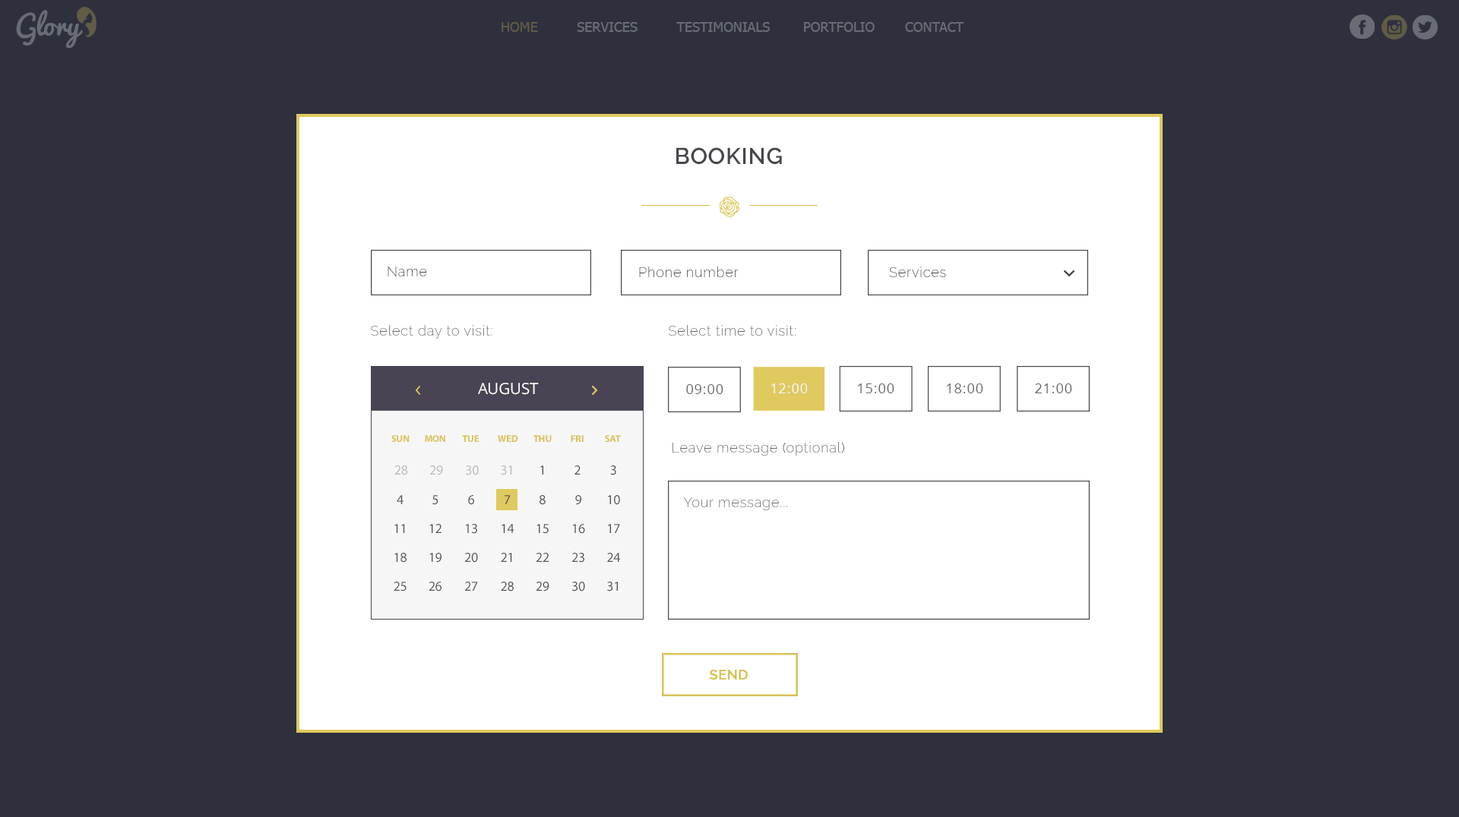
<style>
.page{position:relative;width:1459px;height:817px;background:#2e303d}
.page>*{position:absolute;margin:0}
.t1{font:22.8px "Raleway-SemiBold";letter-spacing:0.025em;color:#48464c}
.t2{font:13.7px "Raleway-ExtraLight";letter-spacing:0.05em;color:#48464c}
.t3{font:13.7px "Raleway-ExtraLight";letter-spacing:0.05em;color:#6a6a6a}
.t4{font:15.6px "OpenSans";letter-spacing:-0.025em;color:#ffffff;text-transform:uppercase}
.t5{font:13.7px "OpenSans";letter-spacing:0.05em;color:#6a6a6a}
.t6{font:13.7px "OpenSans";letter-spacing:0.05em;color:#f6f6f6}
.t7{font:9.7px "MyriadPro-Bold";color:#d8c25b;text-transform:uppercase}
.t8{font:13.6px "MyriadPro-Regular";color:#bababa;text-transform:uppercase}
.t9{font:13.6px "MyriadPro-Regular";color:#555555;text-transform:uppercase}
.t10{font:14.4px "Raleway-Bold";color:#d8c25b;text-transform:uppercase}
</style>
<div class="page">
<p class="t1" style="left:676px;top:147px;width:106px;height:18px">BOOKING</p>
<p class="t2" style="left:387px;top:267px;width:40px;height:10px">Name</p>
<p class="t2" style="left:639px;top:267px;width:99px;height:10px">Phone number</p>
<p class="t2" style="left:889px;top:267px;width:57px;height:10px">Services</p>
<p class="t3" style="left:371px;top:325px;width:121px;height:14px">Select day to visit:</p>
<p class="t3" style="left:669px;top:325px;width:126px;height:11px">Select time to visit:</p>
<p class="t4" style="left:478px;top:383px;width:61px;height:12px">AUGUST</p>
<p class="t5" style="left:686px;top:384px;width:37px;height:10px">09:00</p>
<p class="t6" style="left:771px;top:384px;width:37px;height:10px">12:00</p>
<p class="t5" style="left:858px;top:384px;width:36px;height:10px">15:00</p>
<p class="t5" style="left:947px;top:384px;width:36px;height:10px">18:00</p>
<p class="t5" style="left:1035px;top:384px;width:37px;height:10px">21:00</p>
<p class="t7" style="left:391px;top:435px;width:18px;height:7px">SUN</p>
<p class="t7" style="left:425px;top:435px;width:20px;height:7px">MON</p>
<p class="t7" style="left:462px;top:435px;width:17px;height:7px">TUE</p>
<p class="t7" style="left:498px;top:435px;width:20px;height:7px">WED</p>
<p class="t7" style="left:533px;top:435px;width:19px;height:7px">THU</p>
<p class="t7" style="left:571px;top:435px;width:12px;height:7px">FRI</p>
<p class="t7" style="left:605px;top:435px;width:16px;height:7px">SAT</p>
<p class="t3" style="left:672px;top:442px;width:172px;height:14px">Leave message (optional)</p>
<p class="t8" style="left:394px;top:466px;width:14px;height:10px">28</p>
<p class="t8" style="left:430px;top:466px;width:13px;height:10px">29</p>
<p class="t8" style="left:466px;top:466px;width:13px;height:10px">30</p>
<p class="t8" style="left:501px;top:466px;width:11px;height:10px">31</p>
<p class="t9" style="left:540px;top:466px;width:3px;height:9px">1</p>
<p class="t9" style="left:574px;top:466px;width:6px;height:9px">2</p>
<p class="t9" style="left:610px;top:466px;width:6px;height:10px">3</p>
<p class="t9" style="left:397px;top:495px;width:6px;height:9px">4</p>
<p class="t9" style="left:432px;top:495px;width:6px;height:10px">5</p>
<p class="t9" style="left:468px;top:495px;width:6px;height:10px">6</p>
<p class="t9" style="left:504px;top:495px;width:7px;height:9px">7</p>
<p class="t9" style="left:539px;top:495px;width:6px;height:10px">8</p>
<p class="t9" style="left:575px;top:495px;width:6px;height:10px">9</p>
<p class="t9" style="left:608px;top:495px;width:12px;height:10px">10</p>
<p class="t3" style="left:683px;top:498px;width:104px;height:13px">Your message...</p>
<p class="t9" style="left:394px;top:524px;width:11px;height:9px">11</p>
<p class="t9" style="left:429px;top:524px;width:12px;height:9px">12</p>
<p class="t9" style="left:466px;top:524px;width:11px;height:10px">13</p>
<p class="t9" style="left:501px;top:524px;width:13px;height:9px">14</p>
<p class="t9" style="left:536px;top:524px;width:13px;height:10px">15</p>
<p class="t9" style="left:573px;top:524px;width:12px;height:10px">16</p>
<p class="t9" style="left:608px;top:524px;width:12px;height:9px">17</p>
<p class="t9" style="left:394px;top:553px;width:12px;height:10px">18</p>
<p class="t9" style="left:429px;top:553px;width:12px;height:10px">19</p>
<p class="t9" style="left:465px;top:553px;width:13px;height:10px">20</p>
<p class="t9" style="left:501px;top:553px;width:11px;height:9px">21</p>
<p class="t9" style="left:536px;top:553px;width:13px;height:9px">22</p>
<p class="t9" style="left:572px;top:553px;width:12px;height:10px">23</p>
<p class="t9" style="left:607px;top:553px;width:13px;height:9px">24</p>
<p class="t9" style="left:394px;top:582px;width:12px;height:10px">25</p>
<p class="t9" style="left:428px;top:582px;width:13px;height:10px">26</p>
<p class="t9" style="left:465px;top:582px;width:13px;height:9px">27</p>
<p class="t9" style="left:501px;top:582px;width:13px;height:10px">28</p>
<p class="t9" style="left:536px;top:582px;width:13px;height:10px">29</p>
<p class="t9" style="left:571px;top:582px;width:14px;height:10px">30</p>
<p class="t9" style="left:607px;top:582px;width:11px;height:10px">31</p>
<p class="t10" style="left:709px;top:670px;width:39px;height:10px">SEND</p>
</div>
